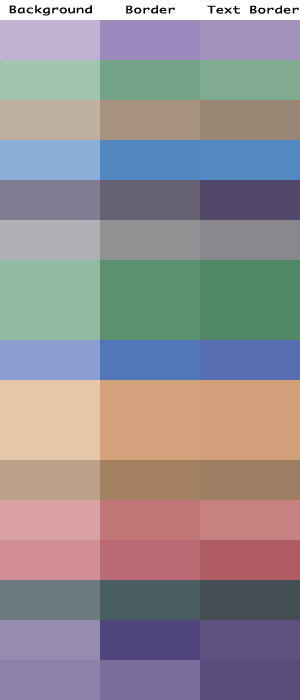
<style>
.page{position:relative;width:300px;height:700px}
.page>*{position:absolute;margin:0}
.t1{font:10px "Monaco";color:#000000;scale:1.4 1}
</style>
<div class="page">
<p class="t1" style="left:9px;top:5px;width:83px;height:11px">Background</p>
<p class="t1" style="left:126px;top:5px;width:49px;height:9px">Border</p>
<p class="t1" style="left:207px;top:5px;width:92px;height:9px">Text Border</p>
</div>
